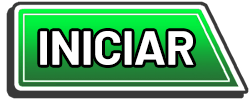
<style>
.page{position:relative;width:250px;height:100px;background:#ffffff}
.page>*{position:absolute;margin:0}
.t1{font:48px "Barlow-Bold";letter-spacing:-0.01em;color:#ffffff}
</style>
<div class="page">
<p class="t1" style="left:40px;top:31px;width:154px;height:34px">INICIAR</p>
</div>
